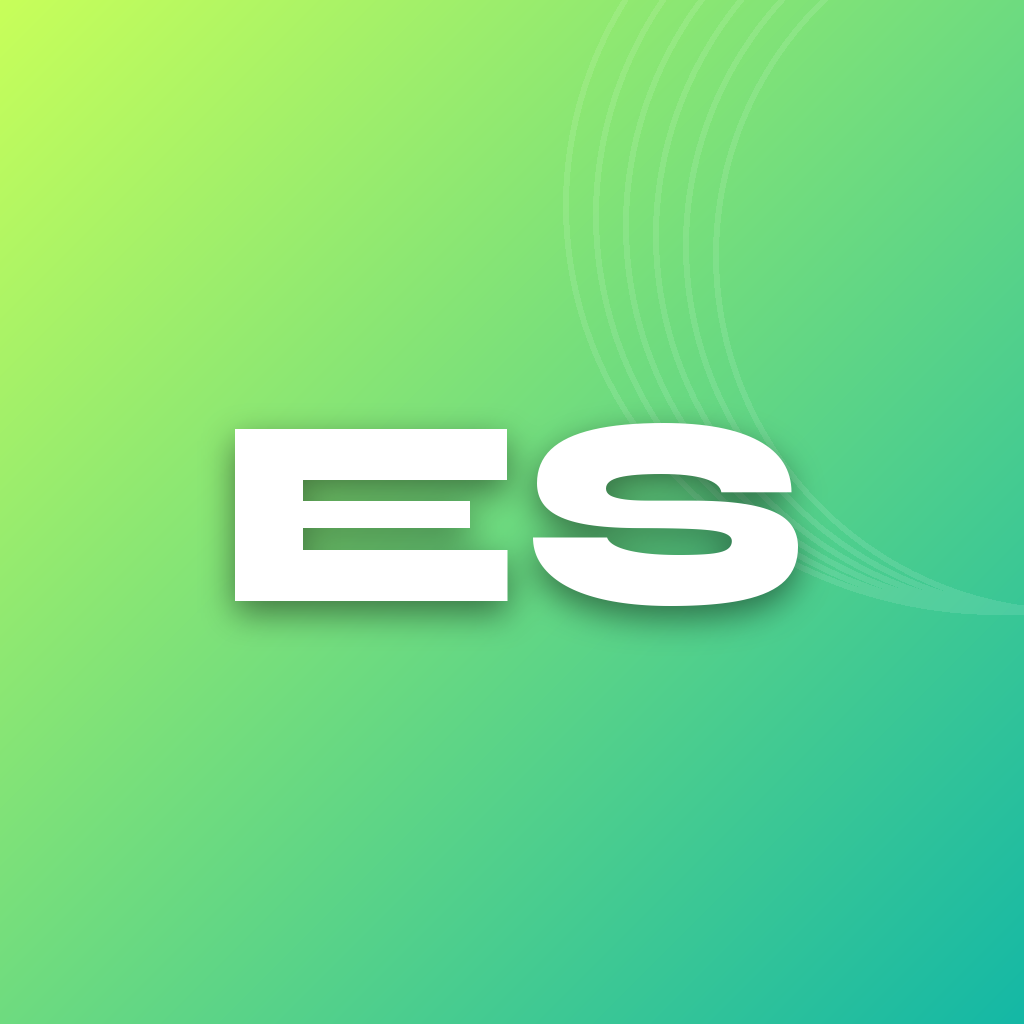
<style>
.page{position:relative;width:1024px;height:1024px}
.page>*{position:absolute;margin:0}
.t1{font:270px "Syne-ExtraBold";color:#ffffff}
</style>
<div class="page">
<p class="t1" style="left:235px;top:423px;width:563px;height:183px">ES</p>
</div>
